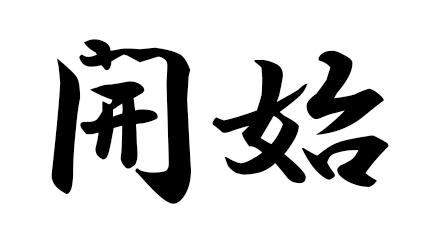
<style>
.page{position:relative;width:440px;height:240px;background:#ffffff}
.page>*{position:absolute;margin:0}
.t1{font:195.8px "HGSGyoshotai";letter-spacing:-0.1em;color:#000000}
</style>
<div class="page">
<p class="t1" style="left:51px;top:39px;width:338px;height:165px">開始</p>
</div>
